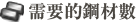
<style>
.page{position:relative;width:136px;height:22px;background:#ffffff}
.page>*{position:absolute;margin:0}
.t1{font:18px "RyuminPr6N-ExBold";color:#4b4742}
</style>
<div class="page">
<p class="t1" style="left:29px;top:2px;width:107px;height:18px">需要的鋼材數</p>
</div>
